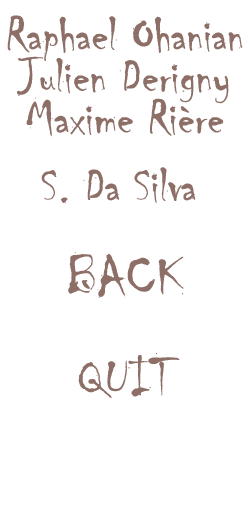
<style>
.page{position:relative;width:250px;height:510px;background:#ffffff}
.page>*{position:absolute;margin:0}
.t1{font:50px/41.7px "Chiller-Regular";color:#8e6f67}
.t2{font:50px "Chiller-Regular";color:#8e6f67}
.t3{font:58.3px "Chiller-Regular";color:#8e6f67}
</style>
<div class="page">
<p class="t1" style="left:7px;top:15px;width:236px;height:122px;text-align:center">Raphael Ohanian<br>Julien Derigny<br>Maxime Rière</p>
<p class="t2" style="left:41px;top:167px;width:155px;height:37px">S. Da Silva</p>
<p class="t3" style="left:68px;top:252px;width:116px;height:46px">BACK</p>
<p class="t3" style="left:78px;top:352px;width:102px;height:46px">QUIT</p>
</div>
